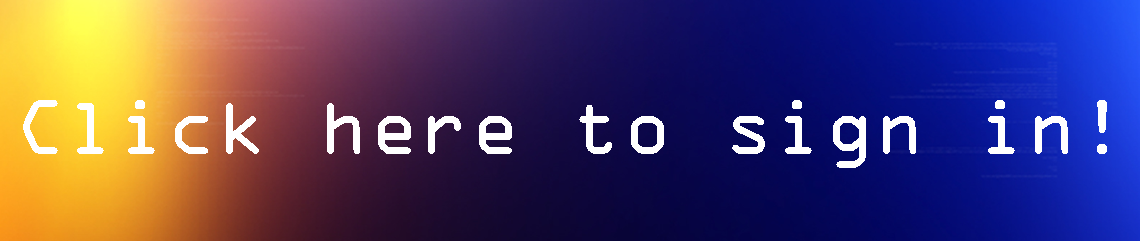
<style>
.page{position:relative;width:1140px;height:241px}
.page>*{position:absolute;margin:0}
.t1{font:69.7px "OCRAStd";color:#ffffff}
</style>
<div class="page">
<p class="t1" style="left:23px;top:100px;width:1084px;height:68px">Click here to sign in!</p>
</div>
